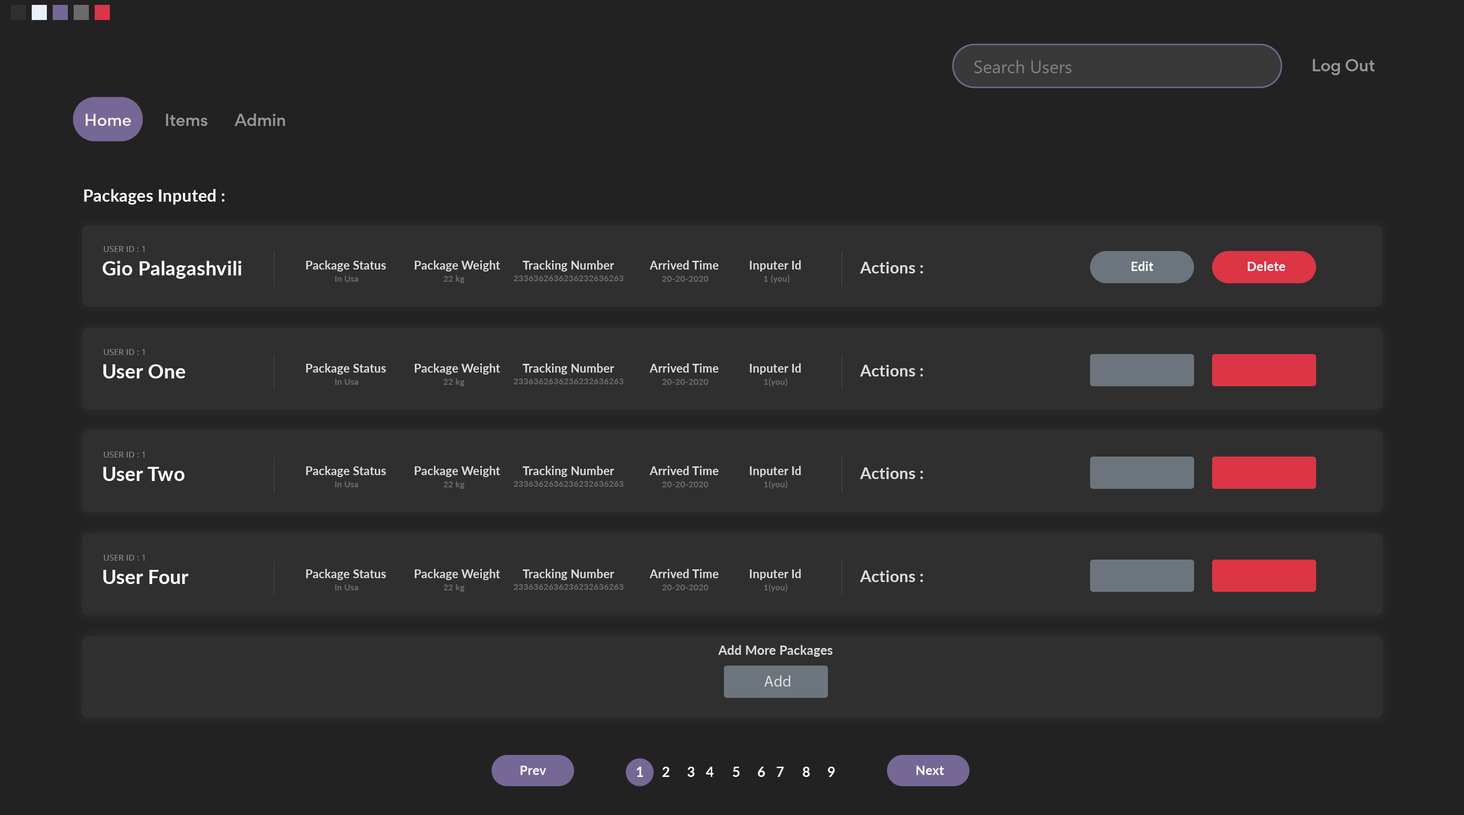
<style>
.page{position:relative;width:1464px;height:815px;background:#222222}
.page>*{position:absolute;margin:0}
.t1{font:16.8px "Lato-Bold";letter-spacing:0.01em;color:#ffffff}
.t2{font:8.3px "OpenSans";letter-spacing:0.01em;color:#8e9595;text-transform:uppercase}
.t3{font:19.7px "Lato-Bold";letter-spacing:0.01em;color:#ffffff}
.t4{font:11.8px "Lato-Bold";letter-spacing:0.01em;color:#dfd9d9}
.t5{font:16.2px "Lato-Bold";letter-spacing:0.01em;color:#dfd9d9}
.t6{font:12.9px "Lato-Bold";letter-spacing:0.01em;color:#ffffff}
.t7{font:8.5px "Lato-Bold";letter-spacing:0.01em;color:#6b6b6b}
.t8{font:12.7px "Lato-Bold";letter-spacing:0.01em;color:#dfd9d9}
.t9{font:15.8px "MyriadPro-Regular";letter-spacing:0.01em;color:#dfd9d9}
.t10{font:13.6px "Lato-Bold";letter-spacing:0.01em;color:#ffffff}
</style>
<div class="page">
<p class="t1" style="left:84px;top:189px;width:141px;height:16px">Packages Inputed :</p>
<p class="t2" style="left:103px;top:246px;width:41px;height:6px">user id : 1</p>
<p class="t3" style="left:102px;top:261px;width:140px;height:18px">Gio Palagashvili</p>
<p class="t4" style="left:306px;top:260px;width:80px;height:11px">Package Status</p>
<p class="t4" style="left:414px;top:260px;width:86px;height:11px">Package Weight</p>
<p class="t4" style="left:522px;top:260px;width:92px;height:11px">Tracking Number</p>
<p class="t4" style="left:649px;top:260px;width:69px;height:9px">Arrived Time</p>
<p class="t4" style="left:750px;top:260px;width:51px;height:11px">Inputer Id</p>
<p class="t5" style="left:860px;top:262px;width:63px;height:11px">Actions :</p>
<p class="t6" style="left:1131px;top:261px;width:22px;height:10px">Edit</p>
<p class="t6" style="left:1248px;top:261px;width:37px;height:10px">Delete</p>
<p class="t7" style="left:335px;top:276px;width:23px;height:6px">In Usa</p>
<p class="t7" style="left:443px;top:275px;width:22px;height:8px">22 kg</p>
<p class="t7" style="left:513px;top:275px;width:110px;height:6px">2336362636236232636263</p>
<p class="t7" style="left:662px;top:276px;width:46px;height:6px">20-20-2020</p>
<p class="t7" style="left:764px;top:275px;width:26px;height:8px">1 (you)</p>
<p class="t2" style="left:103px;top:349px;width:41px;height:6px">user id : 1</p>
<p class="t3" style="left:103px;top:364px;width:82px;height:14px">User One</p>
<p class="t4" style="left:306px;top:363px;width:80px;height:11px">Package Status</p>
<p class="t4" style="left:414px;top:363px;width:86px;height:11px">Package Weight</p>
<p class="t4" style="left:522px;top:363px;width:92px;height:11px">Tracking Number</p>
<p class="t4" style="left:649px;top:363px;width:69px;height:9px">Arrived Time</p>
<p class="t4" style="left:750px;top:363px;width:51px;height:11px">Inputer Id</p>
<p class="t5" style="left:860px;top:365px;width:63px;height:11px">Actions :</p>
<p class="t7" style="left:764px;top:378px;width:23px;height:8px">1(you)</p>
<p class="t7" style="left:335px;top:379px;width:23px;height:6px">In Usa</p>
<p class="t7" style="left:443px;top:378px;width:22px;height:8px">22 kg</p>
<p class="t7" style="left:513px;top:378px;width:110px;height:6px">2336362636236232636263</p>
<p class="t7" style="left:662px;top:379px;width:46px;height:6px">20-20-2020</p>
<p class="t2" style="left:103px;top:451px;width:41px;height:6px">user id : 1</p>
<p class="t3" style="left:103px;top:467px;width:81px;height:14px">User Two</p>
<p class="t4" style="left:306px;top:466px;width:80px;height:11px">Package Status</p>
<p class="t4" style="left:414px;top:466px;width:86px;height:11px">Package Weight</p>
<p class="t4" style="left:522px;top:466px;width:92px;height:11px">Tracking Number</p>
<p class="t4" style="left:649px;top:466px;width:69px;height:9px">Arrived Time</p>
<p class="t4" style="left:750px;top:466px;width:51px;height:11px">Inputer Id</p>
<p class="t5" style="left:860px;top:467px;width:63px;height:12px">Actions :</p>
<p class="t7" style="left:335px;top:481px;width:23px;height:6px">In Usa</p>
<p class="t7" style="left:443px;top:481px;width:22px;height:8px">22 kg</p>
<p class="t7" style="left:513px;top:481px;width:110px;height:6px">2336362636236232636263</p>
<p class="t7" style="left:662px;top:481px;width:46px;height:6px">20-20-2020</p>
<p class="t7" style="left:764px;top:480px;width:23px;height:9px">1(you)</p>
<p class="t2" style="left:103px;top:554px;width:41px;height:6px">user id : 1</p>
<p class="t3" style="left:103px;top:570px;width:85px;height:14px">User Four</p>
<p class="t4" style="left:306px;top:569px;width:80px;height:11px">Package Status</p>
<p class="t4" style="left:414px;top:569px;width:86px;height:11px">Package Weight</p>
<p class="t4" style="left:522px;top:569px;width:92px;height:11px">Tracking Number</p>
<p class="t4" style="left:649px;top:569px;width:69px;height:9px">Arrived Time</p>
<p class="t4" style="left:750px;top:569px;width:51px;height:11px">Inputer Id</p>
<p class="t5" style="left:860px;top:570px;width:63px;height:12px">Actions :</p>
<p class="t7" style="left:335px;top:584px;width:23px;height:6px">In Usa</p>
<p class="t7" style="left:443px;top:584px;width:22px;height:8px">22 kg</p>
<p class="t7" style="left:513px;top:584px;width:110px;height:6px">2336362636236232636263</p>
<p class="t7" style="left:662px;top:584px;width:46px;height:6px">20-20-2020</p>
<p class="t7" style="left:764px;top:583px;width:23px;height:9px">1(you)</p>
<p class="t8" style="left:718px;top:645px;width:115px;height:11px">Add More Packages</p>
<p class="t9" style="left:764px;top:675px;width:26px;height:11px">Add</p>
<p class="t10" style="left:636px;top:766px;width:7px;height:11px">1</p>
<p class="t10" style="left:662px;top:766px;width:7px;height:11px">2</p>
<p class="t10" style="left:687px;top:766px;width:8px;height:11px">3</p>
<p class="t10" style="left:706px;top:766px;width:8px;height:11px">4</p>
<p class="t10" style="left:733px;top:766px;width:6px;height:11px">5</p>
<p class="t10" style="left:758px;top:766px;width:7px;height:11px">6</p>
<p class="t10" style="left:777px;top:766px;width:7px;height:11px">7</p>
<p class="t10" style="left:802px;top:766px;width:8px;height:11px">8</p>
<p class="t10" style="left:828px;top:766px;width:7px;height:11px">9</p>
</div>
